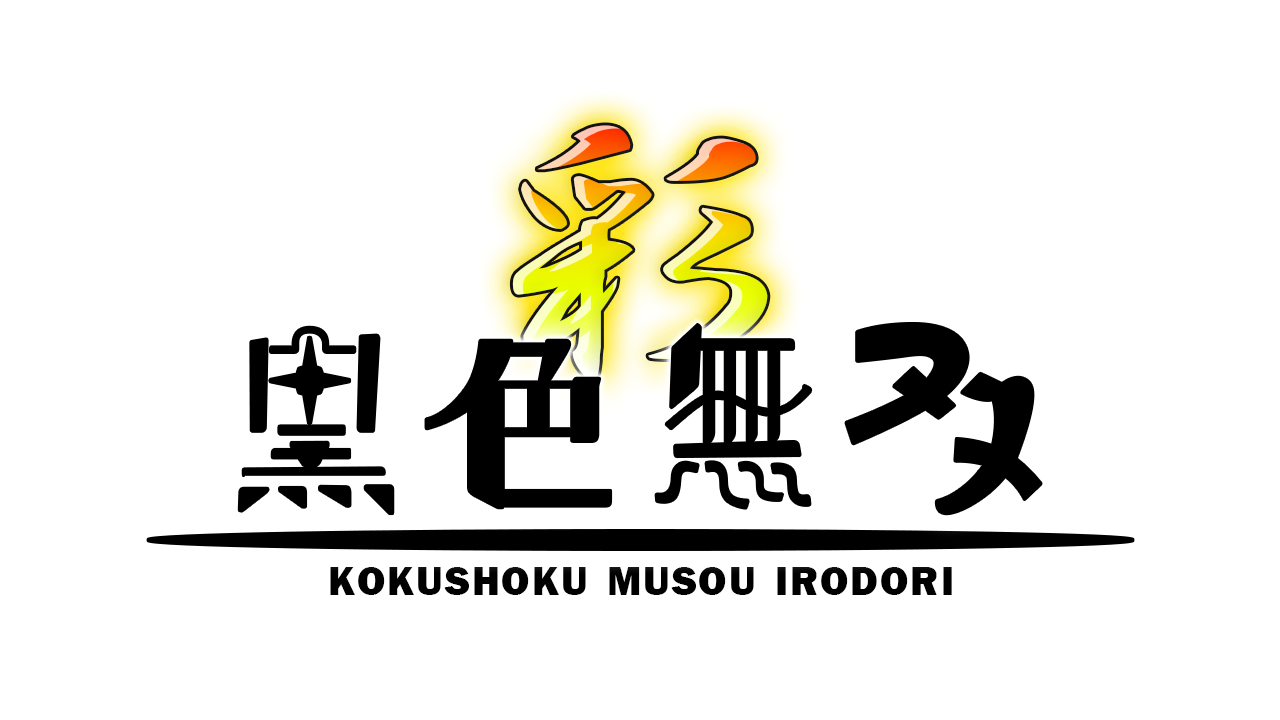
<style>
.page{position:relative;width:1280px;height:720px;background:#ffffff}
.page>*{position:absolute;margin:0}
.t1{font:200px "pigmo-01";letter-spacing:0.05em;color:#000000;font-variant:small-caps}
.t2{font:58.3px "FranklinGothic-Heavy";letter-spacing:0.05em;color:#000000;font-variant:small-caps}
</style>
<div class="page">
<p class="t1" style="left:239px;top:323px;width:802px;height:191px">黒色無双</p>
<p class="t2" style="left:330px;top:567px;width:622px;height:28px">kokushoku musou irodori</p>
</div>
